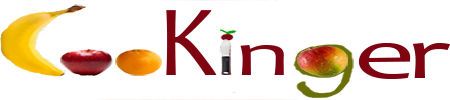
<style>
.page{position:relative;width:450px;height:100px;background:#ffffff}
.page>*{position:absolute;margin:0}
.t1{font:102.2px "Candara";color:#7f0412}
.t2{font:60.6px "Candara";color:#7f0412;scale:1.69 1}
.t3{font:72.7px "Candara";color:#7f0412;scale:1.69 1}
.t4{font:72.7px "Candara";color:#7f0412;scale:1.65 1}
</style>
<div class="page">
<p class="t1" style="left:166px;top:10px;width:51px;height:65px">K</p>
<p class="t2" style="left:240px;top:45px;width:44px;height:30px">n</p>
<p class="t3" style="left:358px;top:43px;width:53px;height:36px">e</p>
<p class="t4" style="left:412px;top:43px;width:39px;height:35px">r</p>
</div>
